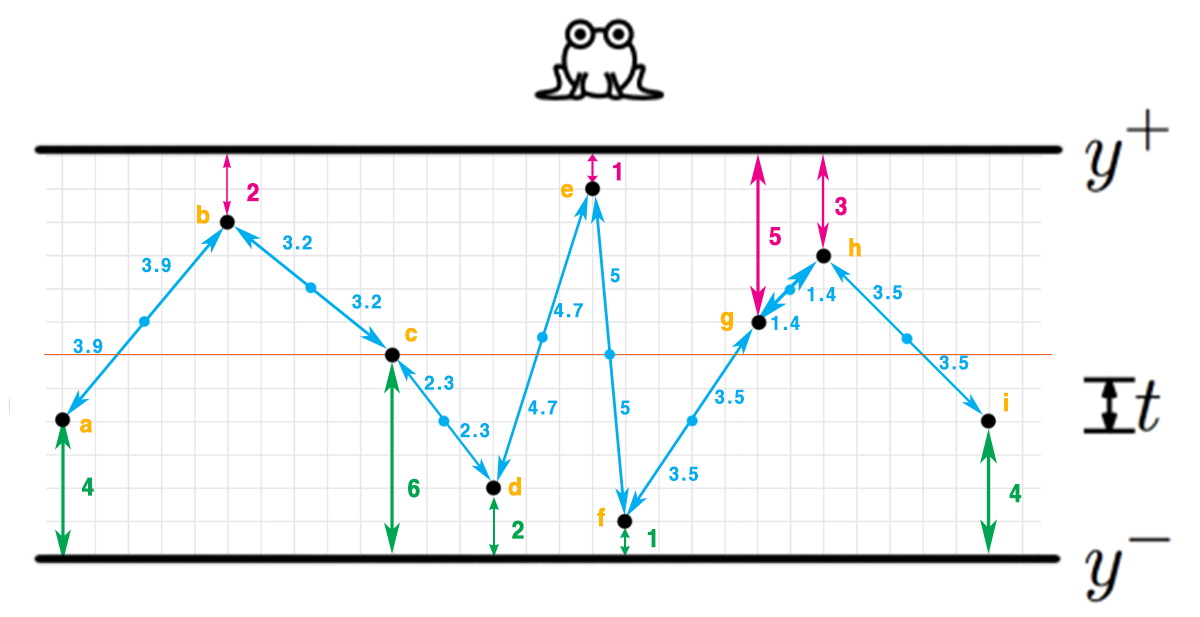
<style>
.page{position:relative;width:1200px;height:617px;background:#ffffff}
.page>*{position:absolute;margin:0}
.t1{font:25px "HelveticaCE-Bold";letter-spacing:0.1em;color:#ec038a;font-weight:bold;scale:0.9 1}
.t2{font:25px "HelveticaCE-Bold";letter-spacing:0.1em;color:#ffb400;font-weight:bold;scale:0.9 1}
.t3{font:20px "HelveticaCE-Bold";letter-spacing:0.1em;color:#00adee;font-weight:bold;scale:0.9 1}
.t4{font:25px "HelveticaCE-Bold";letter-spacing:0.1em;color:#00a552;font-weight:bold;scale:0.9 1}
</style>
<div class="page">
<p class="t1" style="left:613px;top:162px;width:8px;height:19px">1</p>
<p class="t1" style="left:247px;top:183px;width:12px;height:19px">2</p>
<p class="t2" style="left:561px;top:183px;width:13px;height:15px">e</p>
<p class="t1" style="left:835px;top:196px;width:12px;height:20px">3</p>
<p class="t2" style="left:197px;top:205px;width:13px;height:19px">b</p>
<p class="t1" style="left:769px;top:227px;width:12px;height:19px">5</p>
<p class="t3" style="left:283px;top:235px;width:29px;height:15px">3.2</p>
<p class="t2" style="left:849px;top:238px;width:12px;height:19px">h</p>
<p class="t3" style="left:142px;top:257px;width:29px;height:16px">3.9</p>
<p class="t3" style="left:610px;top:268px;width:10px;height:15px">5</p>
<p class="t3" style="left:352px;top:294px;width:29px;height:15px">3.2</p>
<p class="t3" style="left:807px;top:287px;width:29px;height:15px">1.4</p>
<p class="t3" style="left:873px;top:285px;width:29px;height:15px">3.5</p>
<p class="t3" style="left:554px;top:303px;width:29px;height:15px">4.7</p>
<p class="t2" style="left:720px;top:311px;width:13px;height:20px">g</p>
<p class="t3" style="left:771px;top:315px;width:29px;height:15px">1.4</p>
<p class="t2" style="left:405px;top:327px;width:12px;height:15px">c</p>
<p class="t3" style="left:73px;top:338px;width:30px;height:16px">3.9</p>
<p class="t3" style="left:939px;top:355px;width:30px;height:15px">3.5</p>
<p class="t3" style="left:424px;top:375px;width:30px;height:15px">2.3</p>
<p class="t3" style="left:715px;top:389px;width:29px;height:15px">3.5</p>
<p class="t3" style="left:528px;top:400px;width:30px;height:15px">4.7</p>
<p class="t3" style="left:620px;top:400px;width:10px;height:15px">5</p>
<p class="t2" style="left:1004px;top:392px;width:4px;height:20px">i</p>
<p class="t2" style="left:80px;top:418px;width:13px;height:15px">a</p>
<p class="t3" style="left:460px;top:423px;width:30px;height:15px">2.3</p>
<p class="t3" style="left:669px;top:466px;width:29px;height:15px">3.5</p>
<p class="t4" style="left:82px;top:477px;width:12px;height:19px">4</p>
<p class="t4" style="left:408px;top:478px;width:12px;height:20px">6</p>
<p class="t2" style="left:508px;top:477px;width:13px;height:19px">d</p>
<p class="t4" style="left:1009px;top:484px;width:13px;height:19px">4</p>
<p class="t2" style="left:597px;top:507px;width:8px;height:20px">f</p>
<p class="t4" style="left:512px;top:520px;width:12px;height:19px">2</p>
<p class="t4" style="left:647px;top:529px;width:9px;height:19px">1</p>
</div>
